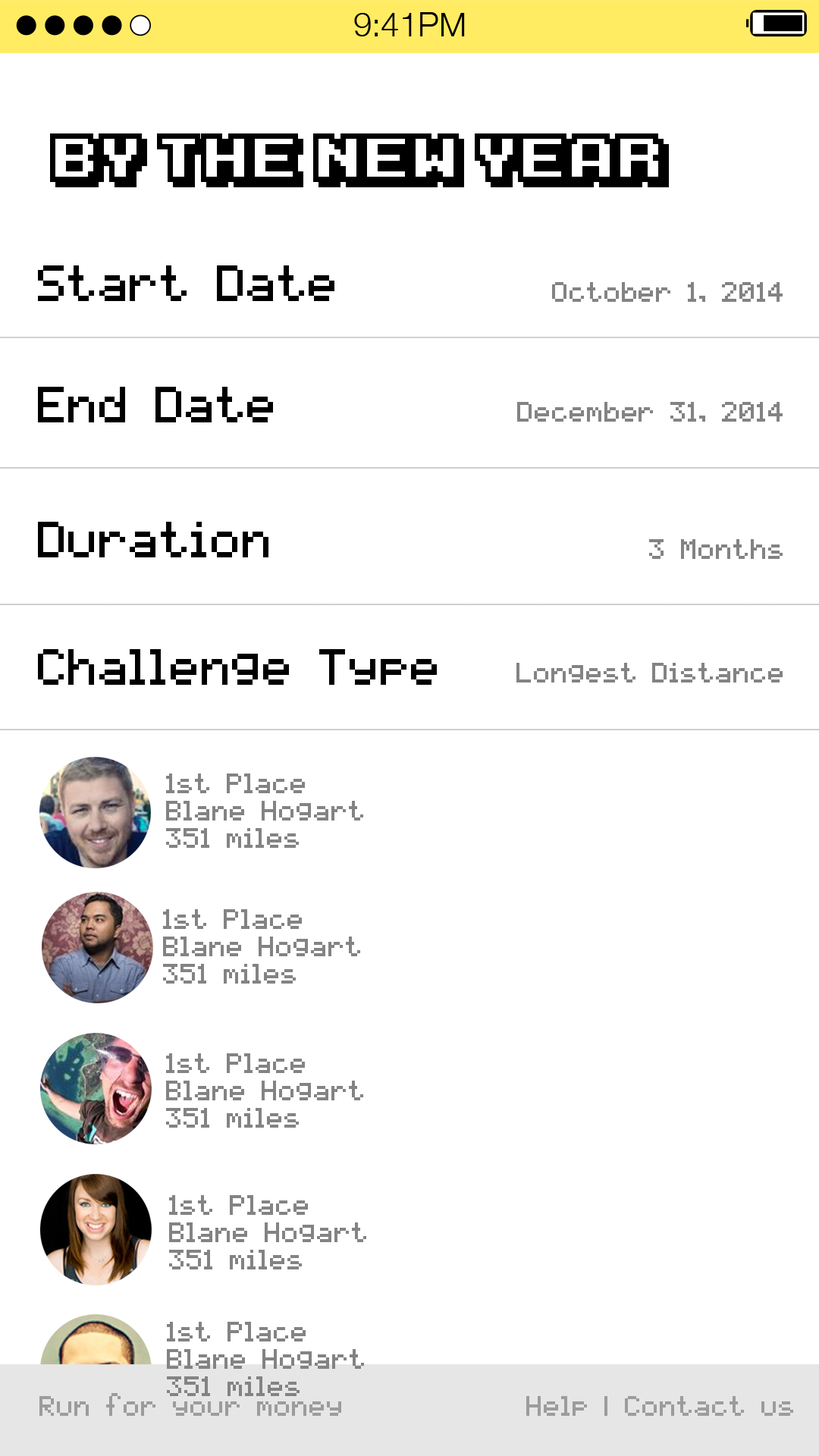
<style>
.page{position:relative;width:819px;height:1456px;background:#ffffff}
.page>*{position:absolute;margin:0}
.t1{font:55.4px "KarmaticArcade";color:#000000}
.t2{font:40.9px "pixelmix";color:#000000}
.t3{font:22.7px "pixelmix";color:#838383}
.t4{font:22.7px "pixelmix";color:#9c9c9c}
</style>
<div class="page">
<p class="t1" style="left:50px;top:133px;width:619px;height:54px">By The New Year</p>
<p class="t2" style="left:38px;top:265px;width:296px;height:36px">Start Date</p>
<p class="t3" style="left:552px;top:282px;width:231px;height:20px">October 1, 2014</p>
<p class="t2" style="left:38px;top:387px;width:235px;height:35px">End Date</p>
<p class="t3" style="left:517px;top:402px;width:266px;height:20px">December 31, 2014</p>
<p class="t2" style="left:38px;top:522px;width:230px;height:35px">Duration</p>
<p class="t3" style="left:649px;top:539px;width:134px;height:20px">3 Months</p>
<p class="t2" style="left:38px;top:649px;width:399px;height:36px">Challenge Type</p>
<p class="t3" style="left:516px;top:663px;width:267px;height:19px">Longest Distance</p>
<p class="t3" style="left:166px;top:773px;width:197px;height:75px">1st Place<br>Blane Hogart<br>351 miles</p>
<p class="t3" style="left:163px;top:909px;width:197px;height:75px">1st Place<br>Blane Hogart<br>351 miles</p>
<p class="t3" style="left:166px;top:1053px;width:197px;height:75px">1st Place<br>Blane Hogart<br>351 miles</p>
<p class="t3" style="left:169px;top:1195px;width:197px;height:74px">1st Place<br>Blane Hogart<br>351 miles</p>
<p class="t3" style="left:167px;top:1322px;width:197px;height:74px">1st Place<br>Blane Hogart<br>351 miles</p>
<p class="t4" style="left:39px;top:1393px;width:302px;height:23px">Run for your money</p>
<p class="t4" style="left:526px;top:1396px;width:267px;height:20px">Help | Contact us</p>
</div>
